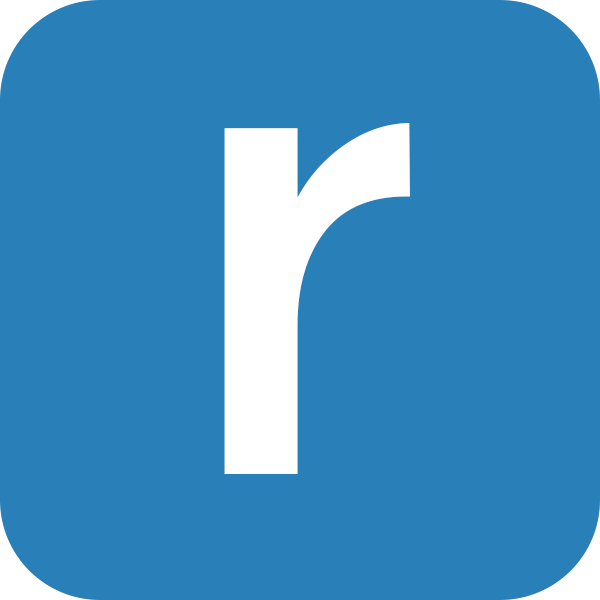
<style>
.page{position:relative;width:600px;height:600px;background:#2980b9}
.page>*{position:absolute;margin:0}
.t1{font:650px "Montserrat-Regular";color:#ffffff}
</style>
<div class="page">
<p class="t1" style="left:224px;top:123px;width:186px;height:351px">r</p>
</div>
